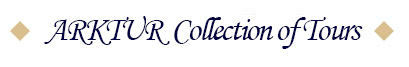
<style>
.page{position:relative;width:409px;height:67px;background:#ffffff}
.page>*{position:absolute;margin:0}
.t1{font:34px "MonotypeCorsiva";letter-spacing:-0.06em;color:#03033f}
</style>
<div class="page">
<p class="t1" style="left:44px;top:16px;width:319px;height:33px">ARKTUR  Collection of Tours</p>
</div>
